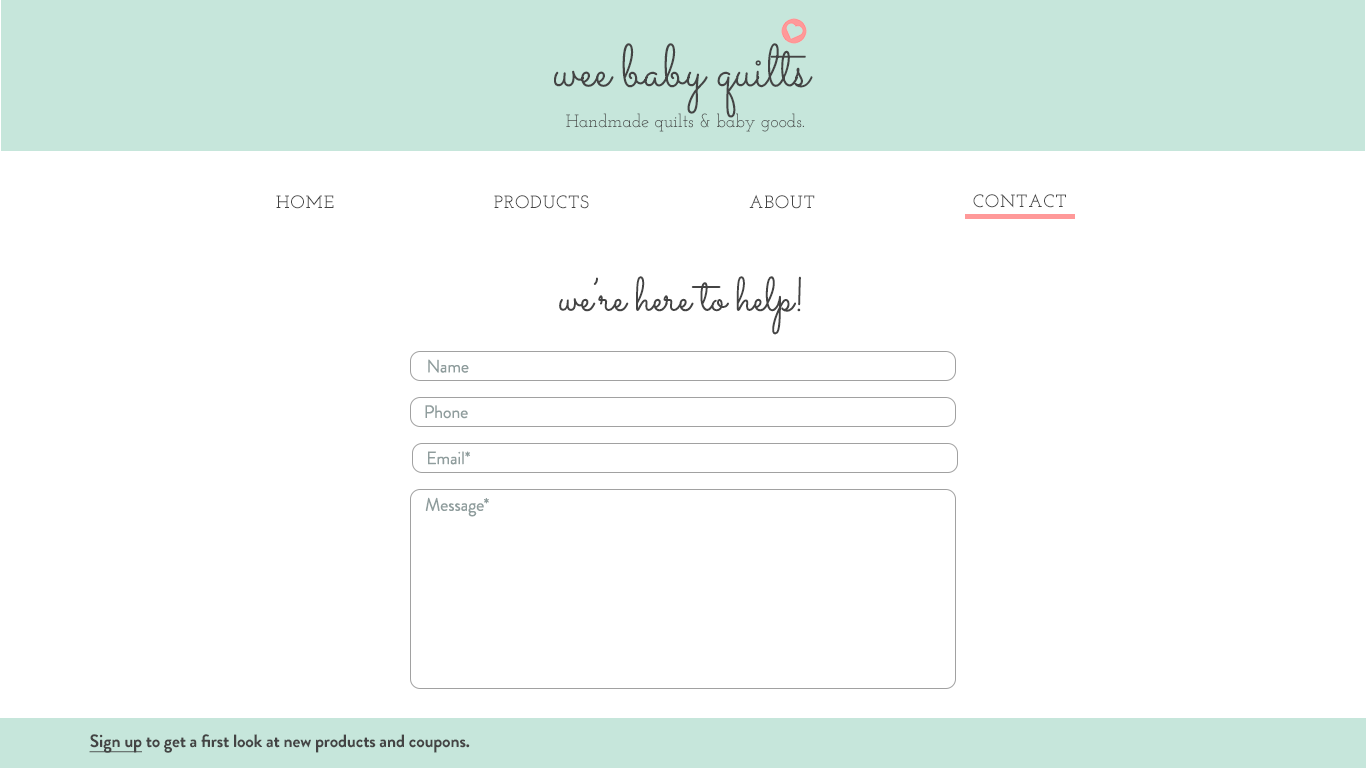
<style>
.page{position:relative;width:1366px;height:768px;background:#ffffff}
.page>*{position:absolute;margin:0}
.t1{font:60px "Sacramento-Regular";letter-spacing:-0.01em;color:#444444}
.t2{font:18px "JosefinSlab-Regular";letter-spacing:-0.01em;color:#444444}
.t3{font:18px "JosefinSlab-SemiBold";letter-spacing:0.05em;color:#444444}
.t4{font:48px "Sacramento-Regular";letter-spacing:-0.01em;color:#444444}
.t5{font:18px "BrandonGrotesque-Regular";letter-spacing:-0.01em;color:#8f9d9d}
.t6{font:18px "BrandonGrotesque-Bold";letter-spacing:-0.01em;color:#444444}
.t7{font:18px "BrandonGrotesque-Bold";letter-spacing:-0.01em;color:#444444;text-decoration:underline}
</style>
<div class="page">
<p class="t1" style="left:554px;top:43px;width:259px;height:75px">wee baby quilts</p>
<p class="t2" style="left:566px;top:113px;width:238px;height:19px">Handmade quilts &amp; baby goods.</p>
<p class="t3" style="left:276px;top:195px;width:58px;height:14px">HOME</p>
<p class="t3" style="left:494px;top:195px;width:95px;height:14px">PRODUCTS</p>
<p class="t3" style="left:749px;top:194px;width:66px;height:15px">ABOUT</p>
<p class="t3" style="left:973px;top:193px;width:93px;height:15px">CONTACT</p>
<p class="t4" style="left:559px;top:276px;width:242px;height:59px">we’re here to help!</p>
<p class="t5" style="left:428px;top:359px;width:41px;height:14px">Name</p>
<p class="t5" style="left:425px;top:405px;width:43px;height:14px">Phone</p>
<p class="t5" style="left:428px;top:451px;width:42px;height:14px">Email*</p>
<p class="t5" style="left:425px;top:497px;width:64px;height:20px">Message*</p>
<p class="t6" style="left:89px;top:734px;width:381px;height:19px"><span class="t7">Sign up</span> to get a first look at new products and coupons.</p>
</div>
